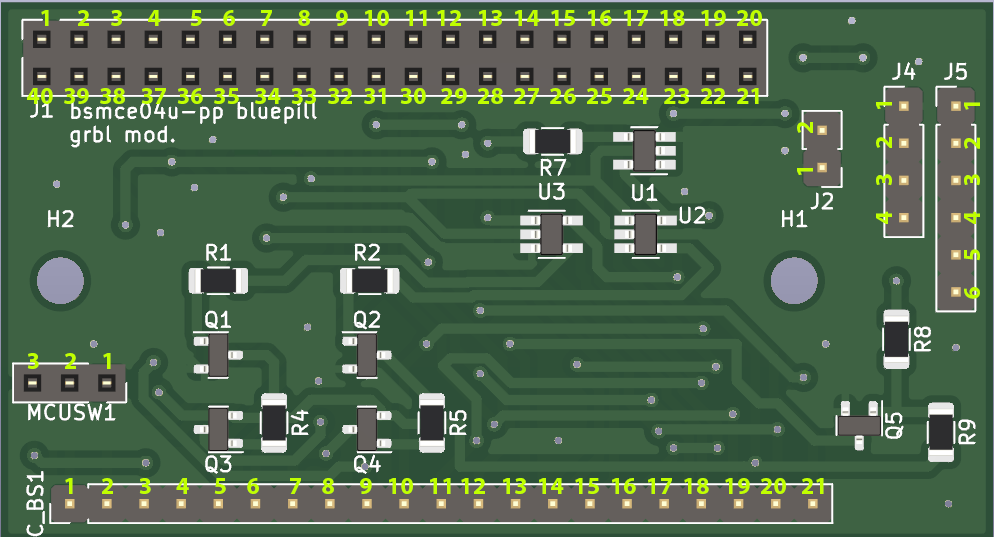
<style>
.page{position:relative;width:994px;height:537px;background:#3e6243}
.page>*{position:absolute;margin:0}
.t1{font:24px "MyriadPro-Bold";color:#c0ff00}
</style>
<div class="page">
<p class="t1" style="left:41px;top:10px;width:721px;height:16px">1     2    3     4      5    6     7     8     9   10   11 12   13  14  15  16  17  18   19  20</p>
<p class="t1" style="left:27px;top:88px;width:732px;height:16px">40  39  38   37  36  35   34  33  32  31  30   29  28  27  26  25  24   23  22  21</p>
<p class="t1" style="left:876px;top:102px;width:16px;height:122px;rotate:-90deg">4     3     2     1</p>
<p class="t1" style="left:964px;top:102px;width:16px;height:197px;rotate:-90deg">6     5     4     3     2     1</p>
<p class="t1" style="left:797px;top:122px;width:16px;height:53px;rotate:-90deg">1      2</p>
<p class="t1" style="left:27px;top:353px;width:84px;height:16px">3     2     1</p>
<p class="t1" style="left:65px;top:478px;width:759px;height:16px">1     2     3     4     5    6      7    8     9   10   11 12   13  14  15  16  17  18   19  20   21</p>
</div>
